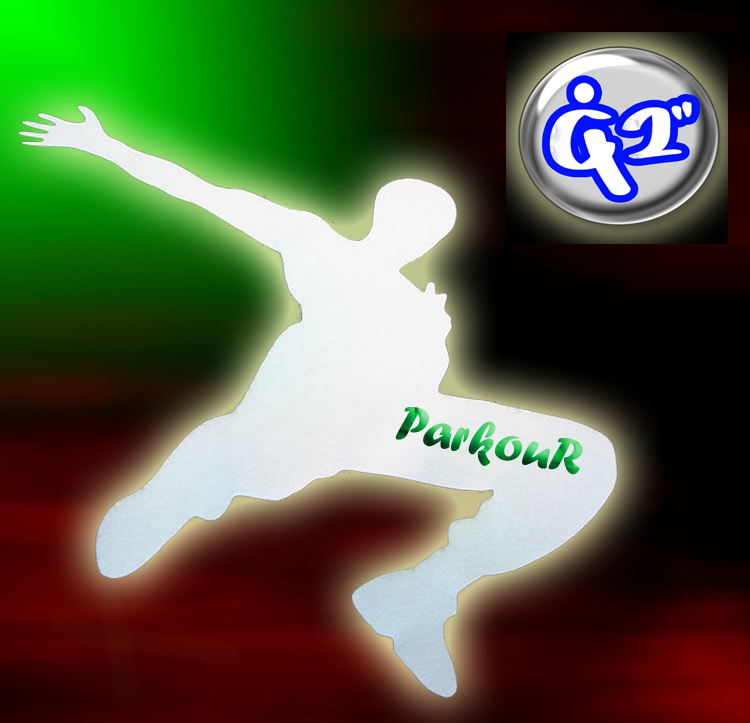
<style>
.page{position:relative;width:750px;height:723px}
.page>*{position:absolute;margin:0}
.t1{font:52.5px "ForteMT"}
</style>
<div class="page">
<p class="t1" style="left:395px;top:407px;width:188px;height:68px;rotate:11deg">ParkouR</p>
</div>
